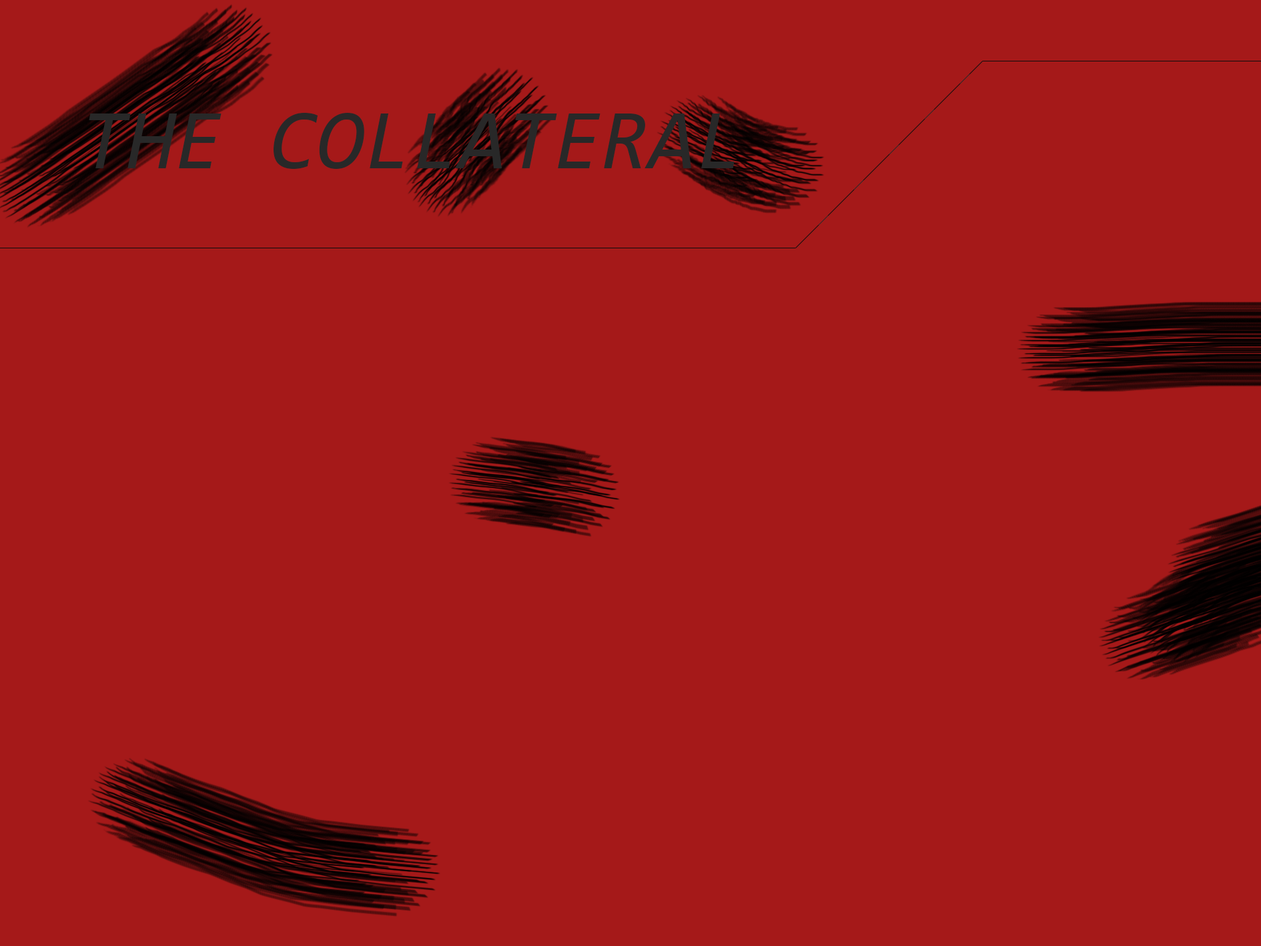
<style>
.page{position:relative;width:1261px;height:946px;background:#a51919}
.page>*{position:absolute;margin:0}
.t1{font:86.2px "Consolas-Italic";color:#282828}
</style>
<div class="page">
<p class="t1" style="left:89px;top:113px;width:646px;height:56px">THE COLLATERAL</p>
</div>
